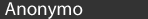
<style>
.page{position:relative;width:148px;height:19px;background:#333333}
.page>*{position:absolute;margin:0}
.t1{font:19px "MyriadPro-Regular";color:#ffffff}
</style>
<div class="page">
<p class="t1" style="left:5px;top:2px;width:78px;height:18px">Anonymo</p>
</div>
